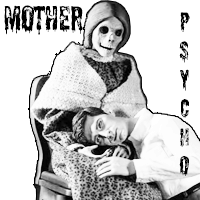
<style>
.page{position:relative;width:200px;height:200px;background:#ffffff}
.page>*{position:absolute;margin:0}
.t1{font:33.3px "ShlopShloppy-Regular";letter-spacing:-0.01em;color:#000000}
.t2{font:24px "ShlopShloppy-Regular";letter-spacing:-0.01em;color:#000000}
</style>
<div class="page">
<p class="t1" style="left:4px;top:5px;width:79px;height:30px">Mother</p>
<p class="t2" style="left:179px;top:12px;width:11px;height:164px;text-align:center">P<br>S<br>Y<br>C<br>H<br>O</p>
</div>
